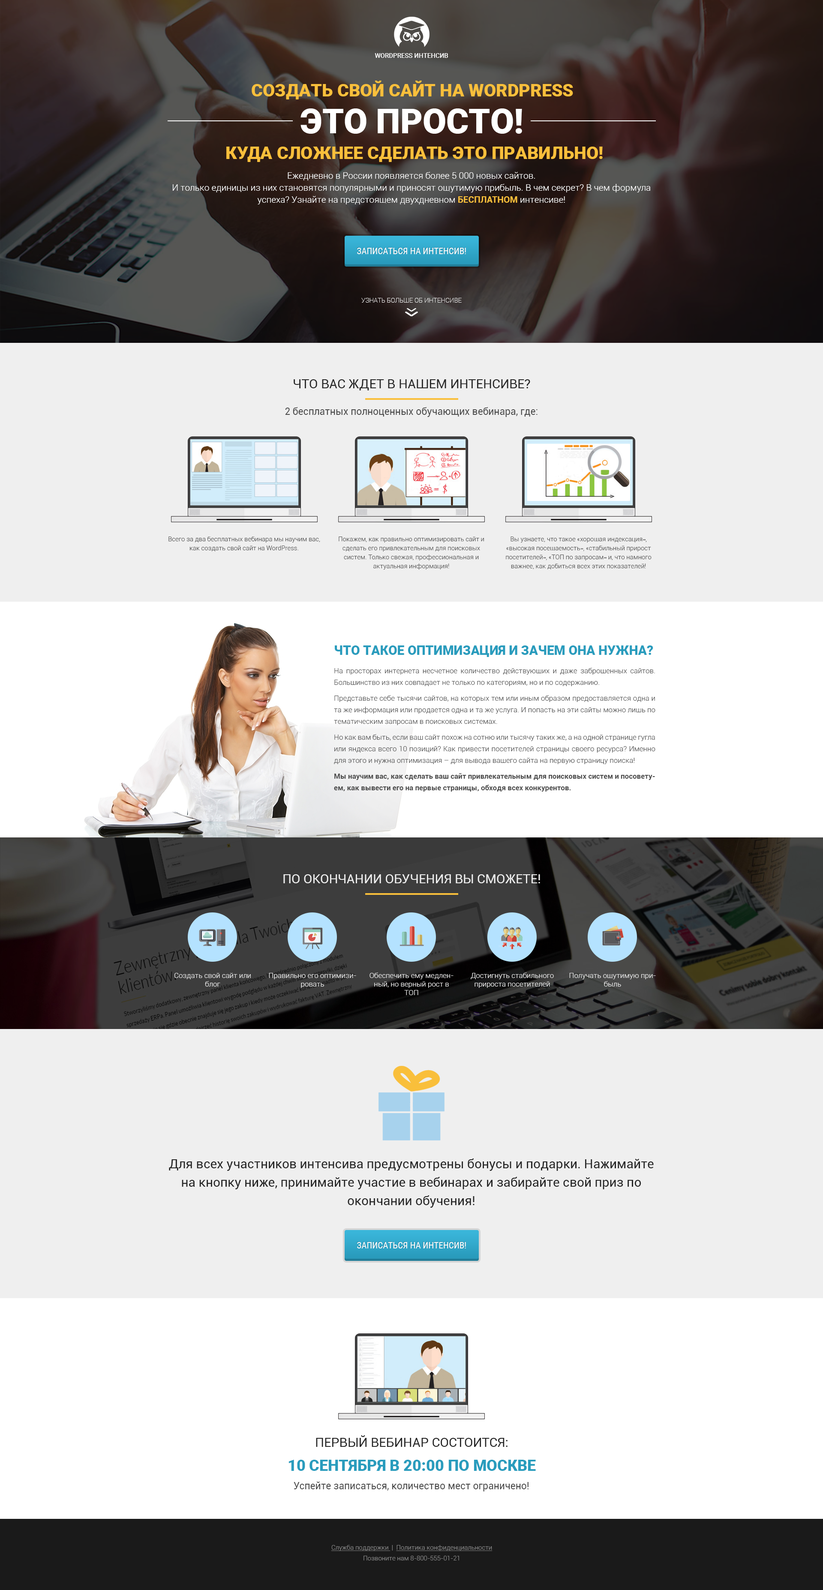
<style>
.page{position:relative;width:823px;height:1590px;background:#ffffff}
.page>*{position:absolute;margin:0}
.t1{font:6.4px "Roboto-Medium";color:#ffffff;text-transform:uppercase}
.t2{font:17.6px "Roboto-Black";color:#f9bf3b;text-transform:uppercase}
.t3{font:34.3px "Roboto-Black";color:#ffffff;text-transform:uppercase}
.t4{font:9px/12px "Roboto-Light";color:#ffffff}
.t5{font:9px/12px "Roboto-Bold";color:#f9bf3b}
.t6{font:9px "RobotoCondensed-Regular";color:#ffffff;text-transform:uppercase}
.t7{font:6.4px "Roboto-Thin";color:#ffffff;text-transform:uppercase}
.t8{font:12.9px "Roboto-Regular";color:#252525;text-transform:uppercase}
.t9{font:9.9px "Roboto-Regular";color:#4a4a4a}
.t10{font:6.4px/9px "Roboto-Light";color:#4a4a4a}
.t11{font:12.9px "Roboto-Black";color:#299cbd;text-transform:uppercase}
.t12{font:7.3px/11.6px "Roboto-Light";color:#4a4a4a}
.t13{font:7.3px/11.6px "Roboto-Bold";color:#4a4a4a}
.t14{font:12.9px "Roboto-Regular";color:#efefef;text-transform:uppercase}
.t15{font:7.3px/8.6px "Roboto-Light";color:#efefef}
.t16{font:12.9px/18.4px "Roboto-Regular";color:#252525}
.t17{font:15.4px "Roboto-Black";color:#299cbd;text-transform:uppercase}
.t18{font:6.4px/9px "Roboto-Light";color:#888888}
.t19{font:6.4px/9px "Roboto-Light";color:#888888;text-decoration:underline}
</style>
<div class="page">
<p class="t1" style="left:375px;top:53px;width:73px;height:5px">WordPress интенсив</p>
<p class="t2" style="left:252px;top:81px;width:321px;height:18px">Создать свой сайт на WordPress</p>
<p class="t3" style="left:300px;top:108px;width:222px;height:26px">это просто!</p>
<p class="t2" style="left:226px;top:147px;width:377px;height:15px">Куда сложнее сделать это правильно!</p>
<p class="t4" style="left:173px;top:172px;width:477px;height:32px;text-align:center">Ежедневно в России появляется более 5 000 новых сайтов.<br>И только единицы из них становятся популярными и приносят ощутимую прибыль. В чем секрет? В чем формула успеха? Узнайте на предстоящем двухдневном <span class="t5">БЕСПЛАТНОМ </span>интенсиве!</p>
<p class="t6" style="left:357px;top:248px;width:109px;height:6px">Записаться на интенсив!</p>
<p class="t7" style="left:361px;top:298px;width:101px;height:5px">узнать больше об интенсиве</p>
<p class="t8" style="left:294px;top:379px;width:236px;height:11px">Что вас ждет в нашем интенсиве?</p>
<p class="t9" style="left:285px;top:407px;width:252px;height:10px">2 бесплатных полноценных обучающих вебинара, где:</p>
<p class="t10" style="left:168px;top:537px;width:152px;height:15px;text-align:center">Всего за два бесплатных вебинара мы научим вас, как создать свой сайт на WordPress.</p>
<p class="t10" style="left:339px;top:537px;width:145px;height:33px;text-align:center">Покажем, как правильно оптимизировать сайт и сделать его привлекательным для поисковых систем. Только свежая, профессиональная и <br>актуальная информация!</p>
<p class="t10" style="left:506px;top:537px;width:145px;height:33px;text-align:center">Вы узнаете, что такое «хорошая индексация»,<br>«высокая посещаемость», «стабильный прирост посетителей», «ТОП по запросам» и, что намного важнее, как добиться всех этих показателей!</p>
<p class="t11" style="left:335px;top:645px;width:318px;height:12px">Что такое оптимизация и зачем она нужна?</p>
<p class="t12" style="left:334px;top:668px;width:321px;height:124px;text-align:justify">На просторах интернета несчетное количество действующих и даже заброшенных сайтов. Большинство из них совпадает не только по категориям, но и по содержанию. <br>Представьте себе тысячи сайтов, на которых тем или иным образом предоставляется одна и та же информация или продается одна и та же услуга. И попасть на эти сайты можно лишь по тематическим запросам в поисковых системах. <br>Но как вам быть, если ваш сайт похож на сотню или тысячу таких же, а на одной странице гугла или яндекса всего 10 позиций? Как привести посетителей страницы своего ресурса? Именно для этого и нужна оптимизация – для вывода вашего сайта на первую страницу поиска! <br><span class="t13">Мы научим вас, как сделать ваш сайт привлекательным для поисковых систем и посоветуем, как вывести его на первые страницы, обходя всех конкурентов.</span></p>
<p class="t14" style="left:283px;top:874px;width:257px;height:9px">По окончании обучения Вы сможете!</p>
<p class="t15" style="left:174px;top:973px;width:77px;height:14px;text-align:center">Создать свой сайт или блог</p>
<p class="t15" style="left:269px;top:973px;width:87px;height:15px;text-align:center">Правильно его оптимизировать</p>
<p class="t15" style="left:369px;top:972px;width:84px;height:23px;text-align:center">Обеспечить ему медленный, но верный рост в ТОП</p>
<p class="t15" style="left:471px;top:972px;width:83px;height:16px;text-align:center">Достигнуть стабильного прироста посетителей</p>
<p class="t15" style="left:569px;top:973px;width:87px;height:14px;text-align:center">Получать ощутимую прибыль</p>
<p class="t16" style="left:169px;top:1158px;width:485px;height:50px;text-align:center">Для всех участников интенсива предусмотрены бонусы и подарки. Нажимайте на кнопку ниже, принимайте участие в вебинарах и забирайте свой приз по окончании обучения!</p>
<p class="t6" style="left:357px;top:1242px;width:109px;height:6px">Записаться на интенсив!</p>
<p class="t8" style="left:316px;top:1435px;width:191px;height:12px">Первый вебинар состоится:</p>
<p class="t17" style="left:288px;top:1460px;width:248px;height:11px">10 сентября в 20:00 по Москве</p>
<p class="t9" style="left:294px;top:1482px;width:234px;height:9px">Успейте записаться, количество мест ограничено!</p>
<p class="t18" style="left:331px;top:1545px;width:161px;height:15px;text-align:center"><span class="t19">Служба поддержки </span> |  <span class="t19">Политика конфиденциальности<br></span>Позвоните нам 8-800-555-01-21</p>
</div>
